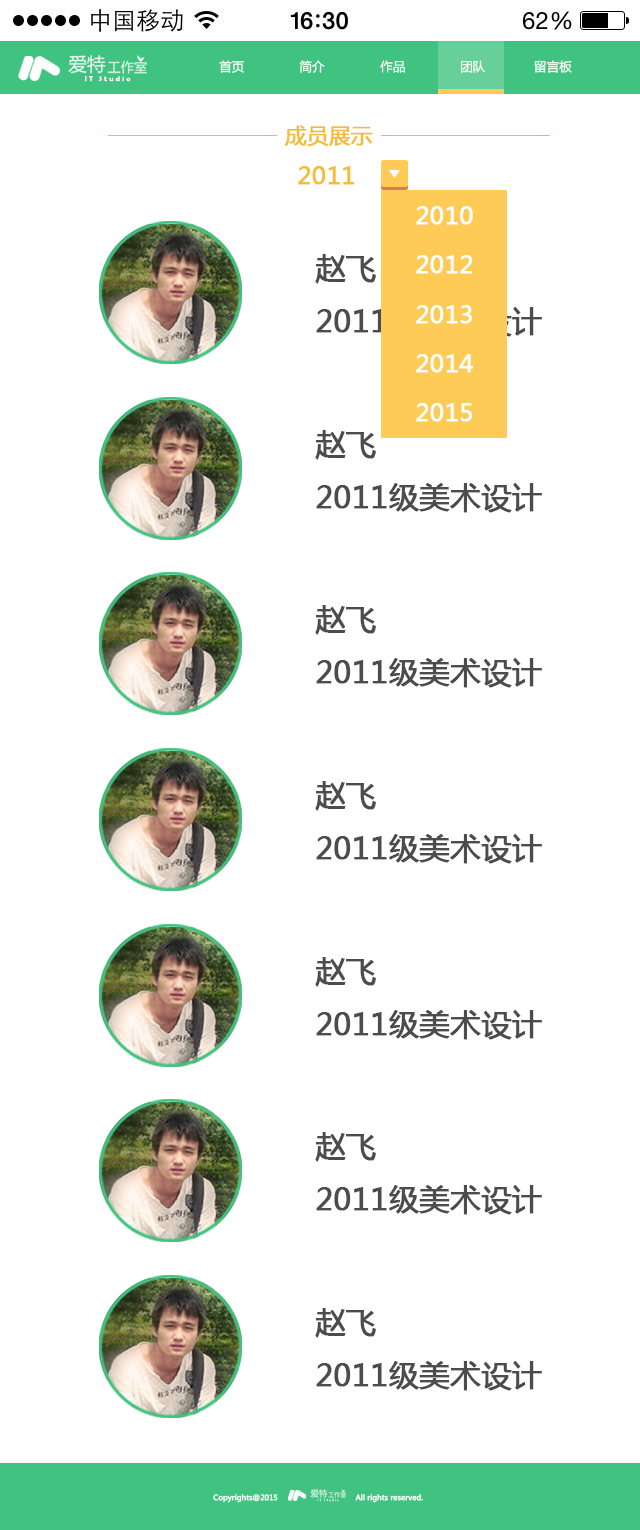
<style>
.page{position:relative;width:640px;height:1530px;background:#ffffff}
.page>*{position:absolute;margin:0}
.t1{font:12.6px "MicrosoftYaHei";color:#ffffff}
.t2{font:7.8px "BerlinSansFBDemi-Bold";color:#ffffff}
.t3{font:21.3px "MicrosoftYaHei";color:#f4bc39;font-weight:bold}
.t4{font:24px "MicrosoftYaHei";color:#f4bc39;font-weight:bold}
.t5{font:24px "MicrosoftYaHei";color:#ffffff;font-weight:bold}
.t6{font:30px "MicrosoftYaHei";font-weight:bold}
.t7{font:30px "MicrosoftYaHei";color:#4d4b4b;font-weight:bold}
.t8{font:7.2px "MicrosoftYaHei";color:#ffffff;font-weight:bold}
.t9{font:3.6px "BerlinSansFBDemi-Bold"}
</style>
<div class="page">
<p class="t1" style="left:219px;top:60px;width:25px;height:13px">首页</p>
<p class="t1" style="left:299px;top:60px;width:26px;height:13px">简介</p>
<p class="t1" style="left:380px;top:60px;width:25px;height:13px">作品</p>
<p class="t1" style="left:461px;top:60px;width:25px;height:13px">团队</p>
<p class="t1" style="left:534px;top:60px;width:38px;height:13px">留言板</p>
<p class="t2" style="left:85px;top:76px;width:46px;height:6px">I T   S t u d i o</p>
<p class="t3" style="left:285px;top:125px;width:88px;height:22px">成员展示</p>
<p class="t4" style="left:298px;top:166px;width:57px;height:19px">2011</p>
<p class="t5" style="left:416px;top:206px;width:57px;height:19px">2010</p>
<p class="t6" style="left:315px;top:254px;width:227px;height:83px">赵飞<br>2011级美术设计</p>
<p class="t5" style="left:416px;top:255px;width:57px;height:19px">2012</p>
<p class="t5" style="left:416px;top:305px;width:56px;height:19px">2013</p>
<p class="t5" style="left:416px;top:354px;width:57px;height:19px">2014</p>
<p class="t5" style="left:416px;top:403px;width:56px;height:19px">2015</p>
<p class="t7" style="left:315px;top:430px;width:227px;height:83px">赵飞<br>2011级美术设计</p>
<p class="t7" style="left:315px;top:605px;width:227px;height:83px">赵飞<br>2011级美术设计</p>
<p class="t7" style="left:315px;top:781px;width:227px;height:83px">赵飞<br>2011级美术设计</p>
<p class="t7" style="left:315px;top:957px;width:227px;height:83px">赵飞<br>2011级美术设计</p>
<p class="t7" style="left:315px;top:1132px;width:227px;height:83px">赵飞<br>2011级美术设计</p>
<p class="t7" style="left:315px;top:1308px;width:227px;height:83px">赵飞<br>2011级美术设计</p>
<p class="t8" style="left:213px;top:1494px;width:65px;height:9px">Copyrights@2015</p>
<p class="t8" style="left:355px;top:1494px;width:68px;height:9px">All rights reserved.</p>
<p class="t9" style="left:317px;top:1498px;width:22px;height:4px">I T   S t u d i o</p>
</div>
